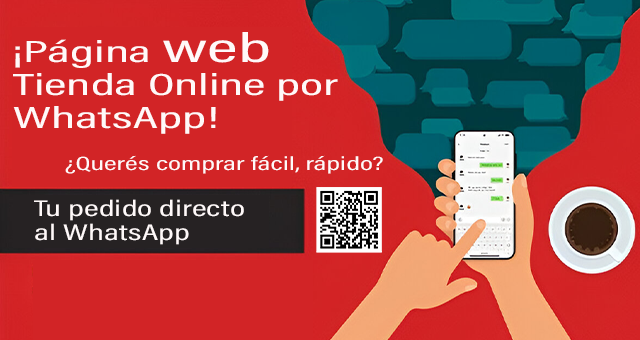
<style>
.page{position:relative;width:640px;height:340px;background:#d22426}
.page>*{position:absolute;margin:0}
.t1{font:30.7px/33.3px "AcuminConcept-Condensed";color:#fff9f9;scale:1.79 1}
.t2{font:42px/33.3px "AcuminConcept-Condensed";color:#fff9f9;scale:1.79 1}
.t3{font:19.4px "AcuminConcept-Condensed";color:#fff9f9;scale:1.59 1}
.t4{font:22.7px/24px "AcuminConcept-Condensed";color:#fff9f9;scale:1.59 1}
</style>
<div class="page">
<p class="t1" style="left:13px;top:32px;width:325px;height:102px">¡Página <span class="t2">web</span> <br>Tienda Online por <br>WhatsApp!</p>
<p class="t3" style="left:65px;top:155px;width:318px;height:19px">¿Querés comprar fácil, rápido?</p>
<p class="t4" style="left:34px;top:199px;width:210px;height:46px">Tu pedido directo <br>al WhatsApp</p>
</div>
